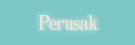
<style>
.page{position:relative;width:135px;height:45px;background:#7dc6c6}
.page>*{position:absolute;margin:0}
.t1{font:20px "RyuminPro-ExBold";letter-spacing:-0.08em;color:#f1e6d8;scale:0.9 1}
</style>
<div class="page">
<p class="t1" style="left:38px;top:15px;width:60px;height:16px">Perusak</p>
</div>
